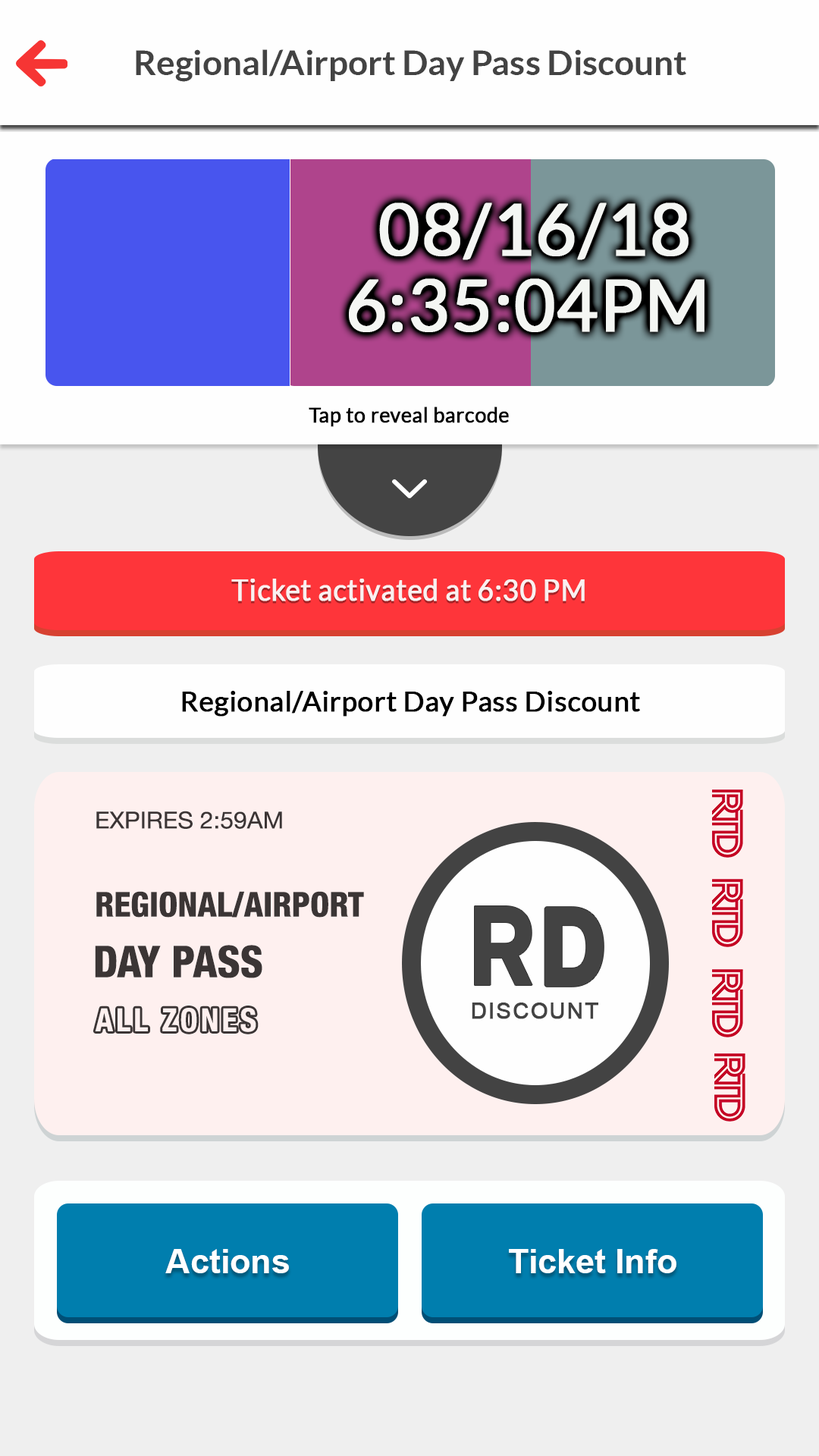
<style>
.page{position:relative;width:819px;height:1456px;background:#efefef}
.page>*{position:absolute;margin:0}
.t1{font:34.2px "Lato-Bold";color:#434343}
.t2{font:71.4px "Lato-Regular";color:#f4f6f3;font-weight:bold}
.t3{font:21.1px "Lato-Regular";color:#000000;font-weight:bold;scale:0.97 1}
.t4{font:30.1px "Lato-Regular";color:#faf0f0;font-weight:bold;scale:0.93 1}
.t5{font:28px "Lato-Regular";color:#000000;font-weight:bold}
.t6{font:23.4px "HelveticaNeueLTPro-Roman";color:#3b3535;scale:1.04 1}
.t7{font:34.2px "HelveticaNeueLTPro-HvCn";color:#3b3535}
.t8{font:112.9px "ArtegraSans-Bold";letter-spacing:0.08em;color:#434343;scale:0.85 1}
.t9{font:109px "ArtegraSans-Bold";letter-spacing:0.08em;color:#434343;font-weight:bold;scale:0.79 1}
.t10{font:44px "HelveticaNeueLTPro-HvCn";color:#3b3535}
.t11{font:32.1px "HelveticaNeueLTPro-BdCn";letter-spacing:0.1em;color:#fef0ef}
.t12{font:21.8px "ArialMT";letter-spacing:0.062em;color:#434343;font-weight:bold}
.t13{font:33.9px "Arial-BoldMT";color:#ffffff}
</style>
<div class="page">
<p class="t1" style="left:136px;top:49px;width:550px;height:33px">Regional/Airport Day Pass Discount</p>
<p class="t2" style="left:379px;top:202px;width:310px;height:58px">08/16/18</p>
<p class="t2" style="left:349px;top:278px;width:355px;height:54px">6:35:04PM</p>
<p class="t3" style="left:309px;top:406px;width:200px;height:21px">Tap to reveal barcode</p>
<p class="t4" style="left:231px;top:579px;width:354px;height:22px">Ticket activated at 6:30 PM</p>
<p class="t5" style="left:182px;top:691px;width:458px;height:26px">Regional/Airport Day Pass Discount</p>
<p class="t6" style="left:96px;top:811px;width:97px;height:18px">EXPIRES</p>
<p class="t6" style="left:200px;top:811px;width:82px;height:18px">2:59AM</p>
<p class="t7" style="left:96px;top:891px;width:268px;height:27px">REGIONAL/AIRPORT</p>
<p class="t8" style="left:475px;top:906px;width:129px;height:81px">R<span class="t9">D</span></p>
<p class="t10" style="left:95px;top:945px;width:167px;height:33px">DAY PASS</p>
<p class="t11" style="left:95px;top:1008px;width:53px;height:23px">ALL</p>
<p class="t11" style="left:162px;top:1008px;width:94px;height:24px">ZONES</p>
<p class="t12" style="left:472px;top:1003px;width:126px;height:16px">DISCOUNT</p>
<p class="t13" style="left:165px;top:1249px;width:124px;height:24px">Actions</p>
<p class="t13" style="left:509px;top:1249px;width:167px;height:24px">Ticket Info</p>
</div>
